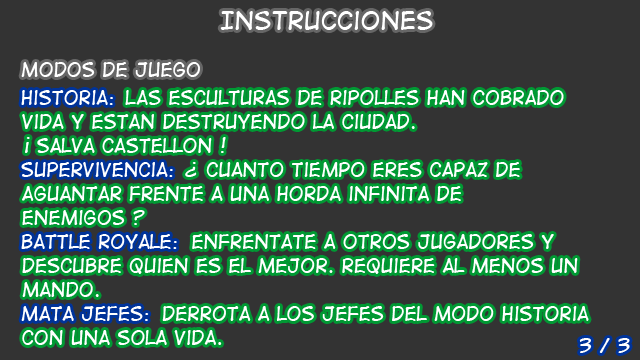
<style>
.page{position:relative;width:640px;height:360px;background:#333333}
.page>*{position:absolute;margin:0}
.t1{font:24px "DigitalStrip";color:#ffffff}
.t2{font:18px "DigitalStrip";color:#ffffff}
.t3{font:18px/24px "DigitalStrip";color:#ffffff}
</style>
<div class="page">
<p class="t1" style="left:220px;top:11px;width:213px;height:19px">Instrucciones</p>
<p class="t2" style="left:21px;top:62px;width:179px;height:15px">Modos de juego</p>
<p class="t3" style="left:21px;top:90px;width:156px;height:231px">Historia:<br><br><br>Supervivencia:<br><br><br>Battle Royale:<br><br><br>Mata jefes:</p>
<p class="t3" style="left:22px;top:90px;width:567px;height:255px">Las esculturas de Ripolles han cobrado <br>vida y estan destruyendo la ciudad. <br>  Salva Castellon !<br>                         Cuanto tiempo eres capaz de <br>aguantar frente a una horda infinita de <br>enemigos ?<br>                       Enfrentate a otros jugadores y <br>descubre quien es el mejor. requiere al menos un <br>mando. <br>                   Derrota a los jefes Del modo historia<br>con una sola vida.</p>
<p class="t2" style="left:579px;top:338px;width:51px;height:15px">3 / 3</p>
</div>
